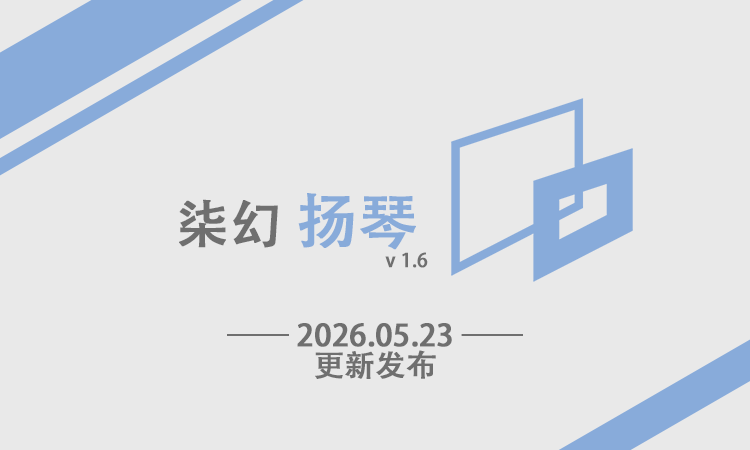
<style>
.page{position:relative;width:750px;height:450px;background:#e9e9e9}
.page>*{position:absolute;margin:0}
.t1{font:19px/60px "AdobeHeitiStd-Regular";color:#6f6f6f;font-weight:bold}
.t2{font:52px/60px "AdobeHeitiStd-Regular";color:#6f6f6f;font-weight:bold}
.t3{font:60px/60px "AdobeHeitiStd-Regular";color:#88abda;font-weight:bold}
.t4{font:30px/30px "AdobeHeitiStd-Regular";color:#6f6f6f;font-weight:bold}
</style>
<div class="page">
<p class="t1" style="left:179px;top:193px;width:249px;height:75px"><span class="t2">柒幻 </span><span class="t3">扬琴<br></span>v 1.6</p>
<p class="t4" style="left:227px;top:323px;width:296px;height:56px;text-align:center">—— 2026.05.23 ——<br>更新发布</p>
</div>
